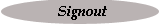
<style>
.page{position:relative;width:161px;height:24px;background:#bab3b3}
.page>*{position:absolute;margin:0}
.t1{font:14px "PalatinoLinotype-BoldItalic";color:#010000}
.t2{font:10px "PalatinoLinotype-BoldItalic";color:#010000}
</style>
<div class="page">
<p class="t1" style="left:58px;top:6px;width:49px;height:14px"><span class="t2">     </span>   Signout</p>
</div>
